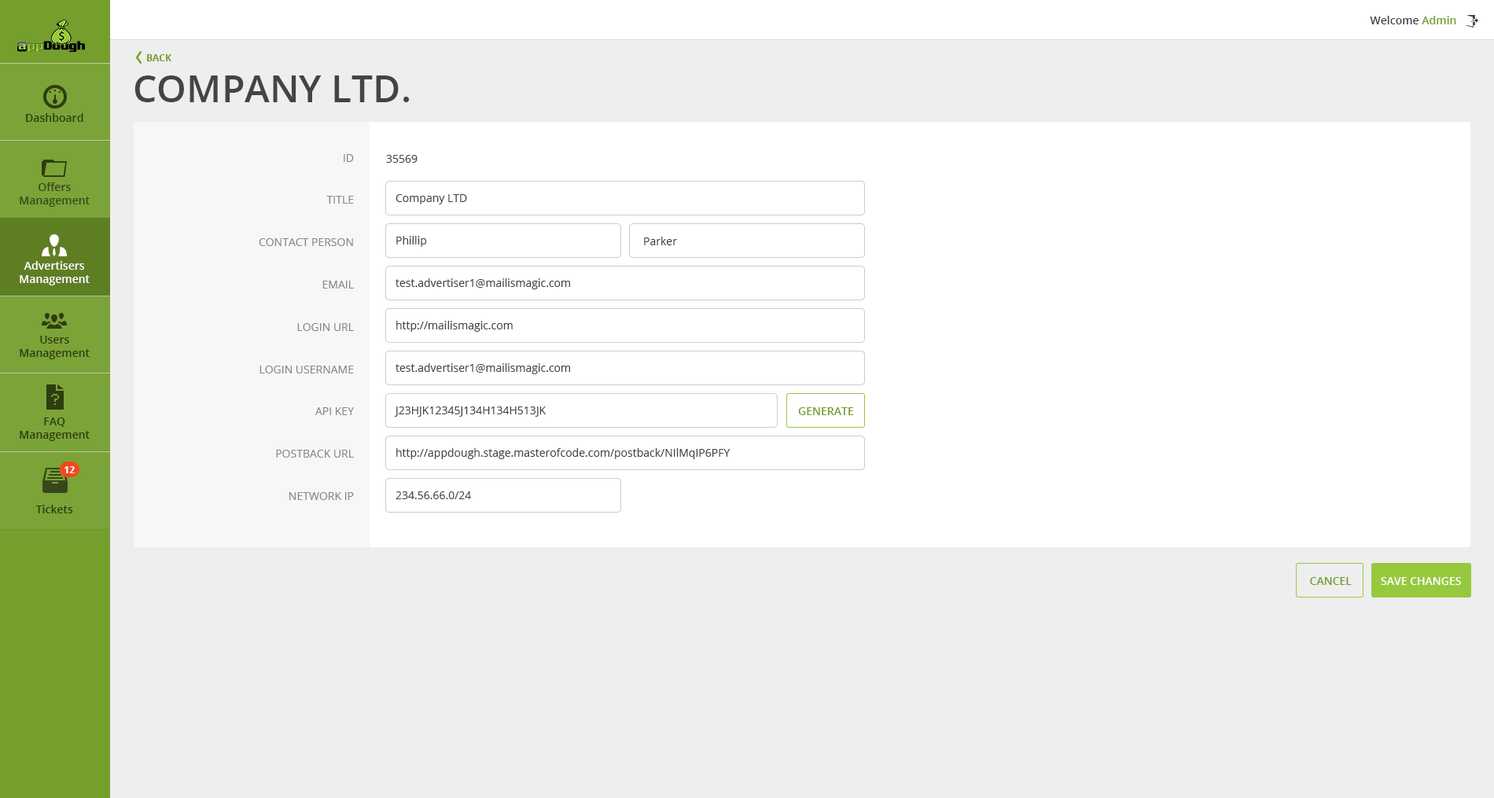
<style>
.page{position:relative;width:1494px;height:798px;background:#ffffff}
.page>*{position:absolute;margin:0}
.t1{font:11px "OpenSans-Semibold";color:#444444}
.t2{font:11px "OpenSans-Semibold";color:#759e2d}
.t3{font:9.4px "OpenSans-Bold";color:#759e2d;text-transform:uppercase}
.t4{font:37.7px "OpenSans-Semibold";color:#444444;text-transform:uppercase}
.t5{font:11px "OpenSans-Semibold";color:#2d3d0f}
.t6{font:11px "OpenSans";color:#888888;text-transform:uppercase}
.t7{font:11px "OpenSans";color:#444444}
.t8{font:11px "OpenSans-Semibold";color:#ffffff}
.t9{font:11px "OpenSans-Semibold";color:#759e2d;text-transform:uppercase}
.t10{font:9.4px "OpenSans-Bold";color:#ffffff}
.t11{font:11px "OpenSans-Semibold";color:#ffffff;text-transform:uppercase}
</style>
<div class="page">
<p class="t1" style="left:1370px;top:16px;width:86px;height:8px">Welcome <span class="t2">Admin</span></p>
<p class="t3" style="left:147px;top:54px;width:24px;height:7px">Back</p>
<p class="t4" style="left:134px;top:75px;width:276px;height:27px">Company LTD.</p>
<p class="t5" style="left:26px;top:113px;width:57px;height:9px">Dashboard</p>
<p class="t6" style="left:259px;top:154px;width:96px;height:346px;text-align:right">ID<br>Title<br>Contact Person<br>Email<br>Login URL<br>Login Username<br>API KEY<br>PostBack URL<br>Network IP</p>
<p class="t7" style="left:386px;top:155px;width:32px;height:8px">35569</p>
<p class="t5" style="left:20px;top:182px;width:70px;height:25px;text-align:center">Offers Management</p>
<p class="t7" style="left:396px;top:194px;width:71px;height:10px">Company LTD</p>
<p class="t7" style="left:396px;top:236px;width:31px;height:11px">Phillip</p>
<p class="t7" style="left:644px;top:237px;width:33px;height:8px">Parker</p>
<p class="t8" style="left:20px;top:261px;width:70px;height:24px;text-align:center">Advertisers Management</p>
<p class="t7" style="left:396px;top:278px;width:174px;height:11px">test.advertiser1@mailismagic.com</p>
<p class="t7" style="left:396px;top:321px;width:117px;height:11px">http://mailismagic.com</p>
<p class="t5" style="left:20px;top:336px;width:70px;height:23px;text-align:center">Users Management</p>
<p class="t7" style="left:396px;top:363px;width:174px;height:11px">test.advertiser1@mailismagic.com</p>
<p class="t7" style="left:394px;top:407px;width:153px;height:10px">J23HJK12345J134H134H513JK</p>
<p class="t9" style="left:798px;top:407px;width:56px;height:8px">GENERATE</p>
<p class="t5" style="left:20px;top:418px;width:70px;height:23px;text-align:center">FAQ Management</p>
<p class="t7" style="left:396px;top:448px;width:335px;height:11px">http://appdough.stage.masterofcode.com/postback/NIlMqIP6PFYophzEQ4q4Eg</p>
<p class="t10" style="left:64px;top:466px;width:11px;height:7px">12</p>
<p class="t7" style="left:396px;top:491px;width:76px;height:8px">234.56.66.0/24</p>
<p class="t5" style="left:35px;top:505px;width:38px;height:8px">Tickets</p>
<p class="t9" style="left:1310px;top:577px;width:42px;height:8px">Cancel</p>
<p class="t11" style="left:1381px;top:577px;width:80px;height:8px">Save Changes</p>
</div>
